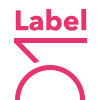
<style>
.page{position:relative;width:100px;height:100px;background:#ffffff}
.page>*{position:absolute;margin:0}
.t1{font:28px "AvenirNext-Bold";color:#e8336d}
</style>
<div class="page">
<p class="t1" style="left:15px;top:9px;width:72px;height:22px">Label</p>
</div>
